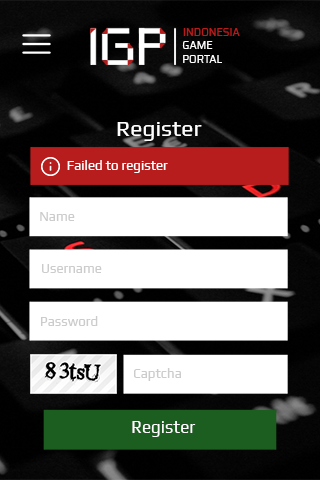
<style>
.page{position:relative;width:320px;height:480px;background:#ffffff}
.page>*{position:absolute;margin:0}
.t1{font:10.6px "Saira-Regular";color:#b71c1c}
.t2{font:10.6px "Saira-Regular";color:#ffffff}
.t3{font:22.8px "Play-Regular";color:#ffffff}
.t4{font:13.3px "Play-Regular";color:#ffffff}
.t5{font:13.3px "Play-Regular";color:#cccccc}
.t6{font:17.1px "Play-Regular";color:#ffffff}
</style>
<div class="page">
<p class="t1" style="left:183px;top:28px;width:57px;height:8px">INDONESIA</p>
<p class="t2" style="left:182px;top:41px;width:31px;height:8px">GAME</p>
<p class="t2" style="left:183px;top:55px;width:39px;height:8px">PORTAL</p>
<p class="t3" style="left:117px;top:122px;width:85px;height:19px">Register</p>
<p class="t4" style="left:67px;top:160px;width:101px;height:13px">Failed to register</p>
<p class="t5" style="left:40px;top:212px;width:35px;height:9px">Name</p>
<p class="t5" style="left:42px;top:264px;width:60px;height:9px">Username</p>
<p class="t5" style="left:41px;top:316px;width:57px;height:10px">Password</p>
<p class="t5" style="left:134px;top:368px;width:47px;height:13px">Captcha</p>
<p class="t6" style="left:132px;top:421px;width:64px;height:16px">Register</p>
</div>
